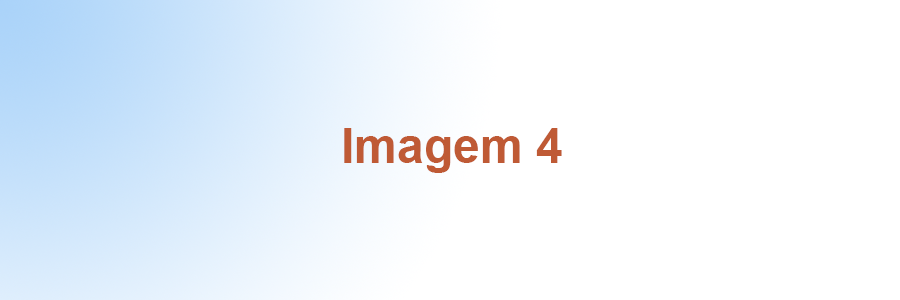
<style>
.page{position:relative;width:900px;height:300px;background:#ffffff}
.page>*{position:absolute;margin:0}
.t1{font:48px "Arial-BoldMT";color:#bf5a35}
</style>
<div class="page">
<p class="t1" style="left:344px;top:128px;width:218px;height:45px">Imagem 4</p>
</div>
